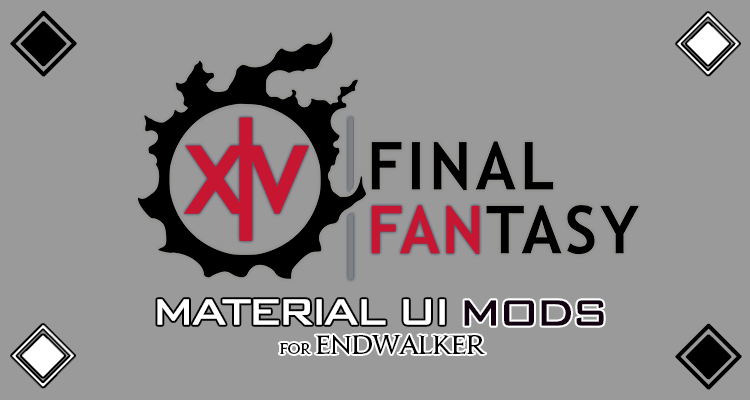
<style>
.page{position:relative;width:750px;height:400px;background:#9a9a9a}
.page>*{position:absolute;margin:0}
.t1{font:72px "Gulim";letter-spacing:-0.1em;color:#000000;font-weight:bold}
.t2{font:69px "Gulim";letter-spacing:-0.1em;color:#ffffff;font-weight:bold}
.t3{font:48px "BankGothic";letter-spacing:-0.1em;color:#ffffff;font-weight:bold}
.t4{font:24px "JupiterPro-Bold";letter-spacing:-0.05em;color:#000000}
.t5{font:48px "BankGothic";letter-spacing:-0.1em;color:#c71632;font-weight:bold}
.t6{font:48px "BankGothic";letter-spacing:-0.1em;color:#100010;font-weight:bold}
.t7{font:14px "JupiterPro-Bold";letter-spacing:-0.05em;color:#000000}
</style>
<div class="page">
<p class="t1" style="left:10px;top:10px;width:67px;height:67px">◈</p>
<p class="t2" style="left:676px;top:12px;width:64px;height:64px">◈</p>
<p class="t3" style="left:157px;top:299px;width:288px;height:26px">MATERIAL UI</p>
<p class="t4" style="left:279px;top:300px;width:325px;height:55px;text-align:center"><span class="t5">                     </span><span class="t6">MODS<br></span><span class="t7">for </span>endwalker</p>
<p class="t2" style="left:11px;top:324px;width:64px;height:64px">◈</p>
<p class="t1" style="left:675px;top:323px;width:67px;height:67px">◈</p>
</div>
